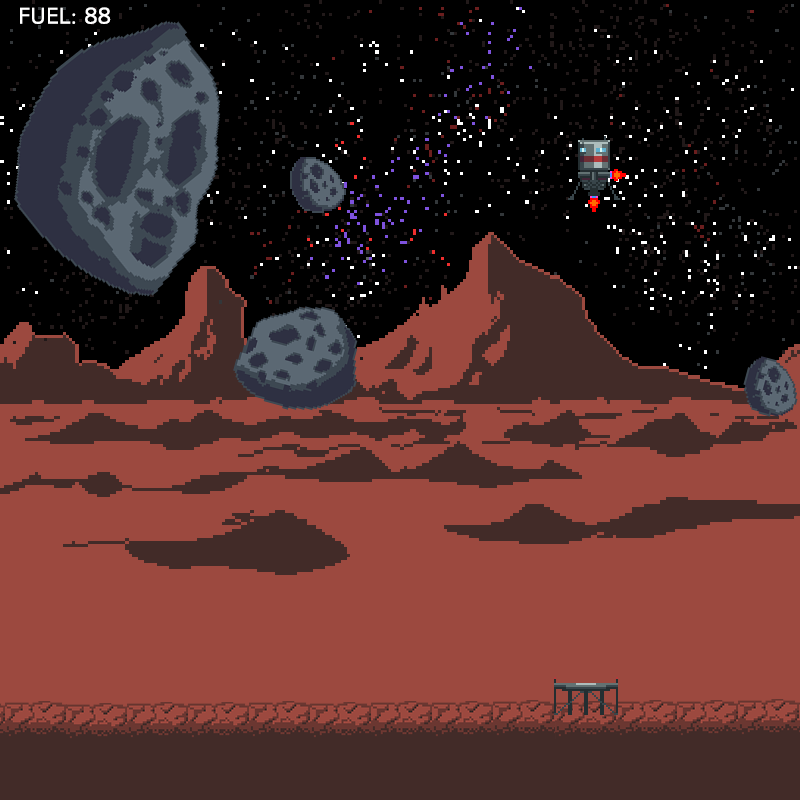
<style>
.page{position:relative;width:800px;height:800px;background:#9c493f}
.page>*{position:absolute;margin:0}
.t1{font:21.4px "WascoSans";color:#ffffff}
</style>
<div class="page">
<p class="t1" style="left:20px;top:7px;width:91px;height:17px">FUEL: 88</p>
</div>
